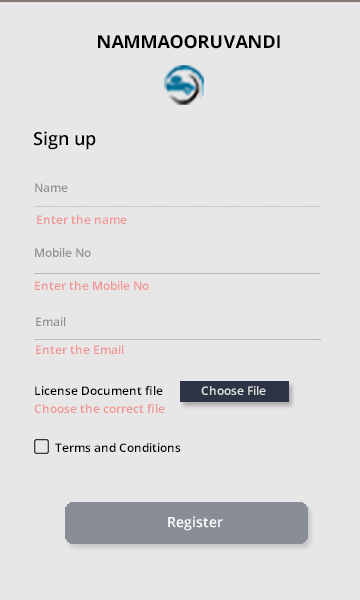
<style>
.page{position:relative;width:360px;height:600px;background:#e7e7e7}
.page>*{position:absolute;margin:0}
.t1{font:18px "OpenSans-Bold";color:#000000}
.t2{font:18px "OpenSans-Semibold";color:#000000}
.t3{font:12px "OpenSans-Semibold";color:#939393}
.t4{font:12px "OpenSans-Semibold";color:#f29494}
.t5{font:12px "OpenSans-Semibold";color:#000000}
.t6{font:12px "OpenSans-Semibold";color:#e0e1e2}
.t7{font:14px "OpenSans-Semibold";color:#ffffff}
</style>
<div class="page">
<p class="t1" style="left:98px;top:35px;width:182px;height:14px"><span class="t2">     </span>  NAMMAOORUVANDI</p>
<p class="t2" style="left:34px;top:131px;width:62px;height:19px">Sign up</p>
<p class="t3" style="left:35px;top:183px;width:33px;height:9px">Name</p>
<p class="t4" style="left:37px;top:215px;width:90px;height:9px">Enter the name</p>
<p class="t3" style="left:35px;top:248px;width:56px;height:9px">Mobile No</p>
<p class="t4" style="left:35px;top:281px;width:114px;height:9px">Enter the Mobile No</p>
<p class="t3" style="left:36px;top:317px;width:30px;height:9px">Email</p>
<p class="t4" style="left:36px;top:345px;width:88px;height:9px">Enter the Email</p>
<p class="t5" style="left:35px;top:386px;width:128px;height:9px">License Document file</p>
<p class="t6" style="left:201px;top:386px;width:65px;height:9px">Choose File</p>
<p class="t4" style="left:34px;top:404px;width:131px;height:9px">Choose the correct file</p>
<p class="t5" style="left:55px;top:443px;width:126px;height:9px">Terms and Conditions</p>
<p class="t7" style="left:168px;top:516px;width:55px;height:15px">Register</p>
</div>
